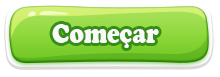
<style>
.page{position:relative;width:220px;height:77px;background:#ffffff}
.page>*{position:absolute;margin:0}
.t1{font:28.2px "CooperBlack";color:#f9f9f9;scale:0.85 1}
</style>
<div class="page">
<p class="t1" style="left:52px;top:24px;width:107px;height:24px">Começar</p>
</div>
